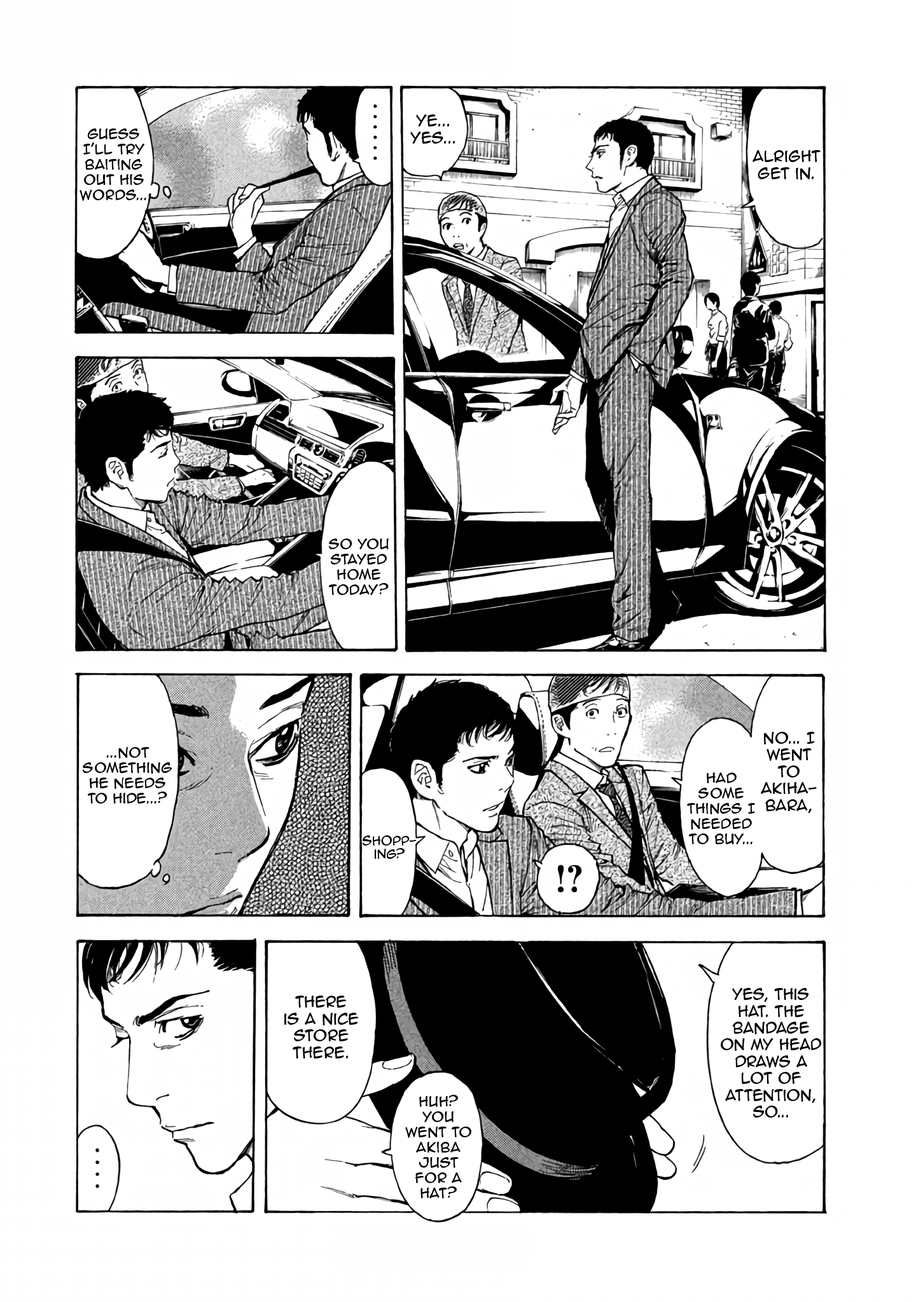
<style>
.page{position:relative;width:916px;height:1302px;background:#ffffff}
.page>*{position:absolute;margin:0}
.t1{font:14px "AnimeAce2.0BB";color:#000000}
.t2{font:12.7px "AnimeAce2.0BB";color:#000000}
.t3{font:11.4px "AnimeAce2.0BB";color:#000000}
</style>
<div class="page">
<p class="t1" style="left:410px;top:114px;width:45px;height:30px;text-align:center">Ye... Yes...</p>
<p class="t2" style="left:79px;top:128px;width:67px;height:73px;text-align:center">guess <br>I’ll try  baiting out his words...</p>
<p class="t1" style="left:752px;top:150px;width:68px;height:30px;text-align:center">Alright Get in.</p>
<p class="t2" style="left:329px;top:539px;width:60px;height:56px;text-align:center">So you stayed home today?</p>
<p class="t1" style="left:761px;top:732px;width:55px;height:81px;text-align:center">No... I went to Akiha-<br>bara,</p>
<p class="t2" style="left:83px;top:747px;width:89px;height:57px;text-align:center">...Not something he needs <br>to hide...?</p>
<p class="t2" style="left:687px;top:773px;width:68px;height:71px;text-align:center">Had some things I needed to buy...</p>
<p class="t3" style="left:362px;top:836px;width:54px;height:23px;text-align:center">shopp-<br>ing?</p>
<p class="t1" style="left:720px;top:988px;width:101px;height:130px;text-align:center">Yes, this hat. The bandage on my head draws a lot of attention, so...</p>
<p class="t1" style="left:284px;top:996px;width:75px;height:63px;text-align:center">there <br>is a nice<br>store  there.</p>
<p class="t2" style="left:405px;top:1095px;width:66px;height:104px;text-align:center">Huh? you went to akiba just for a hat?</p>
</div>
